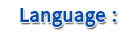
<style>
.page{position:relative;width:120px;height:35px;background:#ffffff}
.page>*{position:absolute;margin:0}
.t1{font:21.2px "Pyidaungsu-Bold";color:#004dad}
</style>
<div class="page">
<p class="t1" style="left:20px;top:8px;width:96px;height:19px">Language :</p>
</div>
